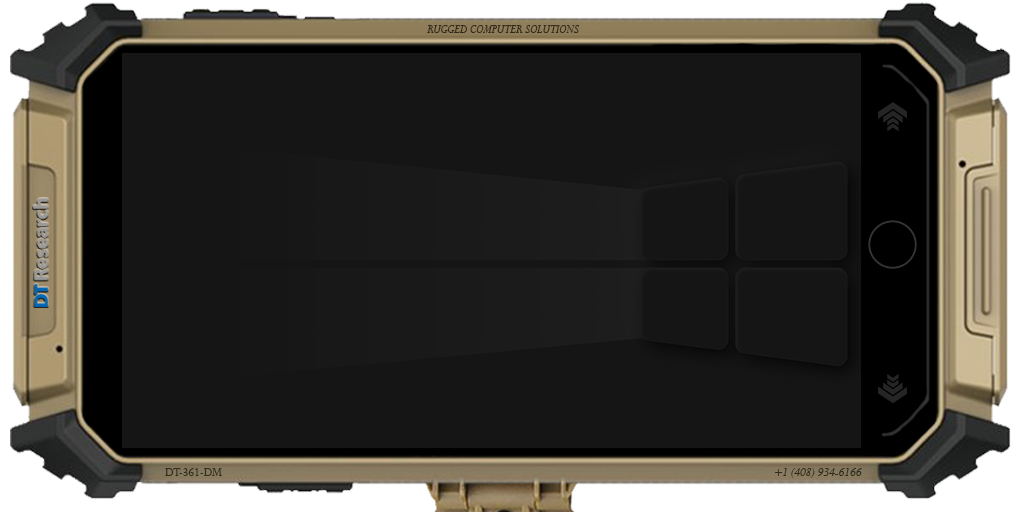
<style>
.page{position:relative;width:1024px;height:512px;background:#151515}
.page>*{position:absolute;margin:0}
.t1{font:12.5px "Perpetua-Italic";color:#332b1c;text-transform:uppercase}
.t2{font:12.5px "Perpetua";color:#322d21;text-transform:uppercase}
.t3{font:12.5px "Perpetua-Italic";color:#2f2b1f;text-transform:uppercase}
</style>
<div class="page">
<p class="t1" style="left:427px;top:25px;width:152px;height:8px">Rugged Computer Solutions</p>
<p class="t2" style="left:165px;top:468px;width:57px;height:8px">DT-361-DM</p>
<p class="t3" style="left:775px;top:468px;width:87px;height:10px">+1 (408) 934-6166</p>
</div>
